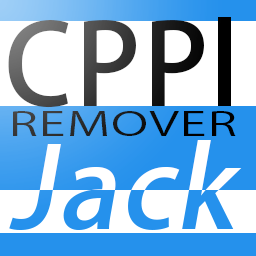
<style>
.page{position:relative;width:256px;height:256px;background:#ffffff}
.page>*{position:absolute;margin:0}
.t1{font:111px "KozGoPr6N-Medium";letter-spacing:0.025em}
.t2{font:32px "KozGoPr6N-Regular";letter-spacing:0.025em;scale:1.56 1}
</style>
<div class="page">
<p class="t1" style="left:8px;top:17px;width:223px;height:91px">CPPl</p>
<p class="t2" style="left:13px;top:111px;width:223px;height:25px">REMOVER</p>
</div>
